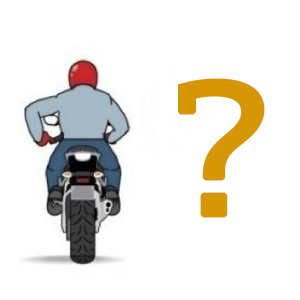
<style>
.page{position:relative;width:300px;height:300px;background:#ffffff}
.page>*{position:absolute;margin:0}
.t1{font:181.3px "LucidaConsole";color:#d79606;font-weight:bold}
</style>
<div class="page">
<p class="t1" style="left:178px;top:78px;width:87px;height:140px">?</p>
</div>
